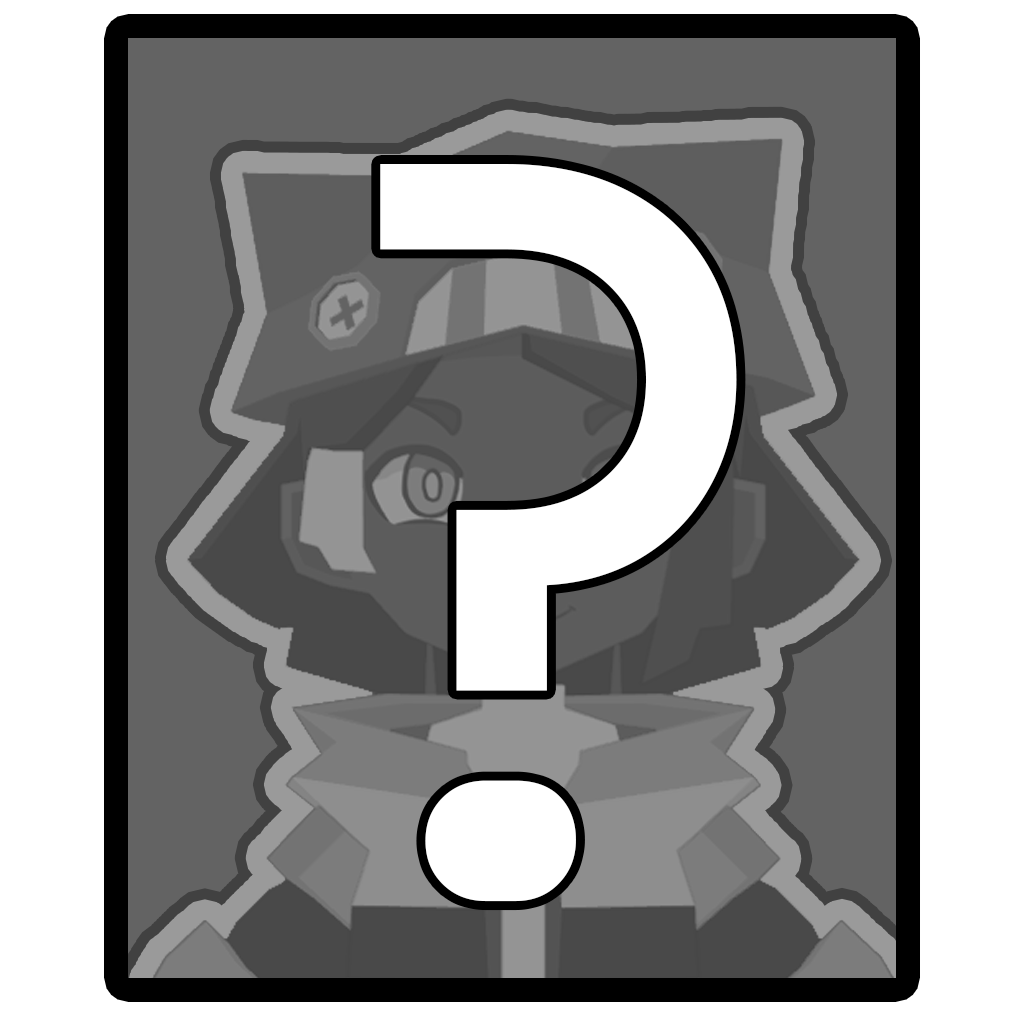
<style>
.page{position:relative;width:1024px;height:1024px;background:#ffffff}
.page>*{position:absolute;margin:0}
.t1{font:1002.7px "JetBrainsMono-Regular";color:#ffffff}
</style>
<div class="page">
<p class="t1" style="left:380px;top:164px;width:357px;height:738px">?</p>
</div>
